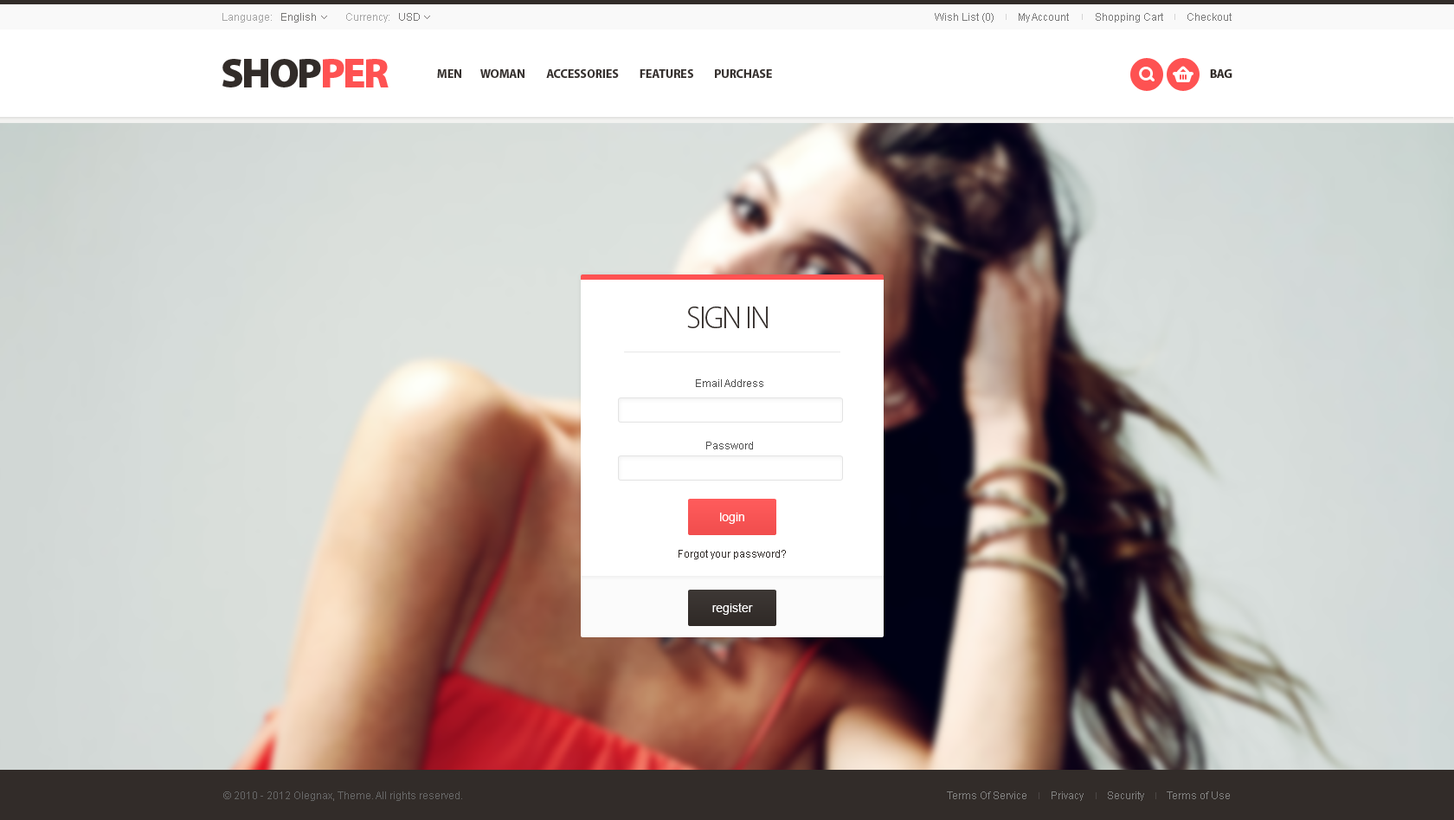
<style>
.page{position:relative;width:1454px;height:820px}
.page>*{position:absolute;margin:0}
.t1{font:10.4px "ArialMT"}
.t2{font:10.4px "ArialMT";color:#656565}
.t3{font:41.6px "MyriadPro-Black";letter-spacing:-0.05em;color:#322c29;text-transform:uppercase}
.t4{font:41.6px "MyriadPro-Black";letter-spacing:-0.05em;color:#fe5252;text-transform:uppercase}
.t5{font:12.1px "MyriadPro-Bold";letter-spacing:-0.01em;color:#373230;text-transform:uppercase}
.t6{font:12.1px "MyriadPro-Bold";letter-spacing:-0.025em;color:#322c29;text-transform:uppercase}
.t7{font:31.2px "MyriadPro-Light";letter-spacing:-0.05em;color:#322c29;text-transform:uppercase}
.t8{font:10.4px/15.6px "ArialMT";color:#505050}
.t9{font:12.1px "ArialMT";color:#ffffff}
.t10{font:10.4px "ArialMT";color:#322c29}
.t11{font:10.4px "ArialMT";color:#505050}
.t12{font:10.4px "ArialMT";color:#666666}
.t13{font:10.4px "ArialMT";color:#8c8c8c}
</style>
<div class="page">
<p class="t1" style="left:222px;top:13px;width:94px;height:10px">Language:   English</p>
<p class="t1" style="left:346px;top:13px;width:74px;height:10px">Currency:   USD</p>
<p class="t2" style="left:935px;top:13px;width:297px;height:10px;opacity:0.86">Wish List (0)         My Account          Shopping Cart         Checkout</p>
<p class="t3" style="left:222px;top:59px;width:167px;height:28px">shop<span class="t4">per</span></p>
<p class="t5" style="left:437px;top:69px;width:335px;height:9px">men        woman         accessories         features         purchase</p>
<p class="t6" style="left:1210px;top:69px;width:23px;height:9px">bag</p>
<p class="t7" style="left:687px;top:306px;width:81px;height:22px">sign in</p>
<p class="t8" style="left:696px;top:379px;width:68px;height:70px;text-align:center">Email Address<br><br><br><br>Password</p>
<p class="t9" style="left:720px;top:513px;width:25px;height:11px">login</p>
<p class="t10" style="left:679px;top:550px;width:107px;height:9px"><span class="t11"><br><br></span>Forgot your password?</p>
<p class="t9" style="left:713px;top:603px;width:40px;height:12px">register</p>
<p class="t12" style="left:223px;top:791px;width:239px;height:10px">© 2010 - 2012 Olegnax, Theme. All rights reserved.</p>
<p class="t13" style="left:947px;top:791px;width:283px;height:10px;opacity:0.87">Terms Of Service         Privacy         Security         Terms of Use</p>
</div>
